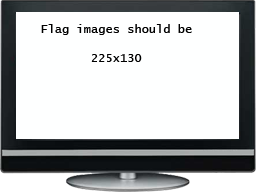
<style>
.page{position:relative;width:256px;height:192px;background:#feffff}
.page>*{position:absolute;margin:0}
.t1{font:12px "LucidaConsole";color:#000000}
</style>
<div class="page">
<p class="t1" style="left:41px;top:24px;width:151px;height:38px">Flag images should be<br><br>         225x130</p>
</div>
